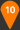
<style>
.page{position:relative;width:20px;height:30px;background:#ff7800}
.page>*{position:absolute;margin:0}
.t1{font:9px "OpenSans";color:#ffffff;font-weight:bold}
</style>
<div class="page">
<p class="t1" style="left:5px;top:6px;width:10px;height:8px">10</p>
</div>
